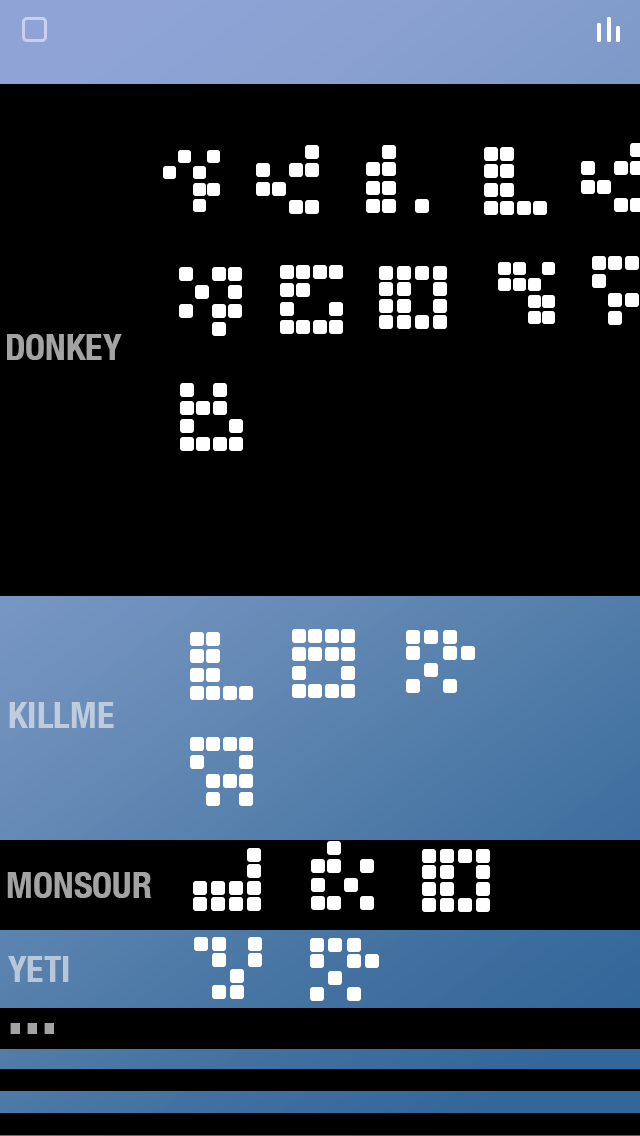
<style>
.page{position:relative;width:640px;height:1136px;background:#000000}
.page>*{position:absolute;margin:0}
.t1{font:36px "HelveticaNeue-CondensedBold";color:#a3a3a3}
.t2{font:36px "HelveticaNeue-CondensedBold";color:#bfccde}
.t3{font:36px "HelveticaNeue-CondensedBold";color:#b8c6d9}
.t4{font:70px "HelveticaNeue-CondensedBold";color:#a3a3a3}
</style>
<div class="page">
<p class="t1" style="left:7px;top:334px;width:115px;height:26px">DONKEY</p>
<p class="t2" style="left:9px;top:702px;width:105px;height:26px">KILLME</p>
<p class="t1" style="left:7px;top:872px;width:145px;height:26px">MONSOUR</p>
<p class="t3" style="left:8px;top:956px;width:61px;height:26px">YETI</p>
<p class="t4" style="left:10px;top:1023px;width:44px;height:11px">...</p>
</div>
